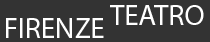
<style>
.page{position:relative;width:210px;height:42px;background:#333333}
.page>*{position:absolute;margin:0}
.t1{font:29.2px "MyriadPro-Regular";color:#ffffff}
</style>
<div class="page">
<p class="t1" style="left:110px;top:5px;width:94px;height:20px">TEATRO</p>
<p class="t1" style="left:6px;top:18px;width:98px;height:20px">FIRENZE</p>
</div>
